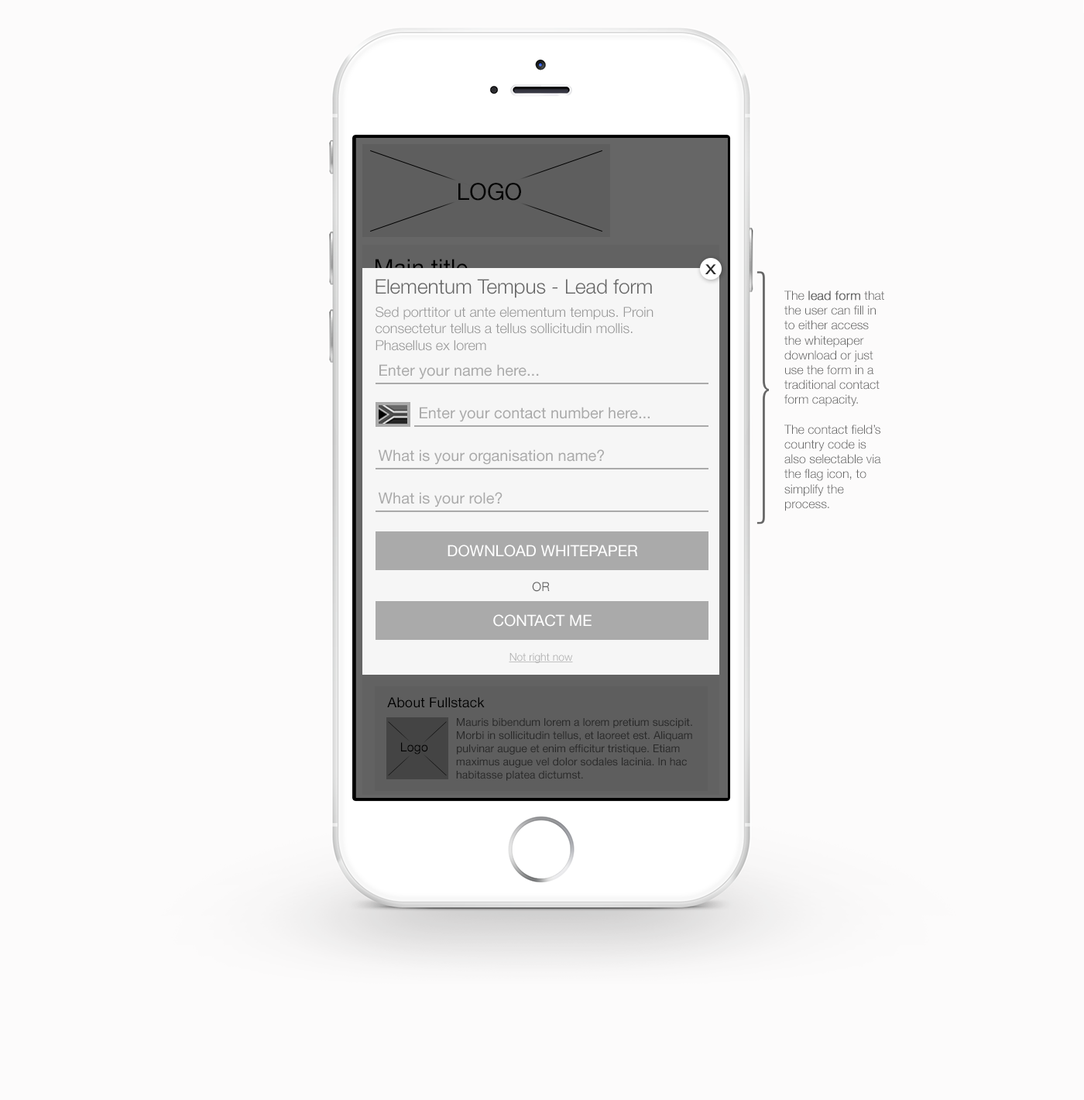
<style>
.page{position:relative;width:1084px;height:1100px;background:#fcfbfb}
.page>*{position:absolute;margin:0}
.t1{font:23.2px "HelveticaNeueLTStd-Roman";color:#000000}
.t2{font:13.9px "HelveticaNeueLTStd-Md";color:#2a2a2a;scale:1.2 1}
.t3{font:20.1px "HelveticaNeueLTStd-Lt";color:#666666}
.t4{font:12.4px "HelveticaNeueLTStd-Lt";color:#666666}
.t5{font:12.4px "HelveticaNeueLTStd-Lt";color:#666666;font-weight:bold}
.t6{font:13.9px "HelveticaNeueLTStd-Lt";color:#999999}
.t7{font:15.5px "HelveticaNeueLTStd-Roman";color:#aaaaaa}
.t8{font:15.5px "HelveticaNeueLTStd-Roman";color:#ffffff}
.t9{font:12.4px "HelveticaNeueLTStd-Roman";color:#626262}
.t10{font:10.8px "HelveticaNeueLTStd-Lt";color:#afafaf;text-decoration:underline}
.t11{font:13.9px "HelveticaNeueLTStd-Roman";color:#000000}
.t12{font:10.8px "HelveticaNeueLTStd-Roman";color:#292929}
.t13{font:12.4px "HelveticaNeueLTStd-Roman";color:#000000}
</style>
<div class="page">
<p class="t1" style="left:458px;top:183px;width:63px;height:18px">LOGO</p>
<p class="t2" style="left:705px;top:264px;width:11px;height:10px">X</p>
<p class="t3" style="left:376px;top:279px;width:276px;height:19px">Elementum Tempus - Lead form</p>
<p class="t4" style="left:785px;top:290px;width:99px;height:221px">The <span class="t5">lead form</span> that the user can fill in to either access the whitepaper download or just use the form in a traditional contact form capacity.<br><br>The contact field’s country code is also selectable via the flag icon, to simplify the process.</p>
<p class="t6" style="left:376px;top:307px;width:278px;height:44px">Sed porttitor ut ante elementum tempus. Proin<br>consectetur tellus a tellus sollicitudin mollis.<br>Phasellus ex lorem</p>
<p class="t7" style="left:379px;top:364px;width:160px;height:15px">Enter your name here...</p>
<p class="t7" style="left:420px;top:407px;width:230px;height:15px">Enter your contact number here...</p>
<p class="t7" style="left:378px;top:449px;width:226px;height:16px">What is your organisation name?</p>
<p class="t7" style="left:378px;top:492px;width:125px;height:15px">What is your role?</p>
<p class="t8" style="left:448px;top:544px;width:190px;height:13px">DOWNLOAD WHITEPAPER</p>
<p class="t9" style="left:532px;top:582px;width:18px;height:10px">OR</p>
<p class="t8" style="left:493px;top:614px;width:99px;height:13px">CONTACT ME</p>
<p class="t10" style="left:509px;top:653px;width:64px;height:10px">Not right now</p>
<p class="t11" style="left:387px;top:697px;width:98px;height:11px">About Fullstack</p>
<p class="t12" style="left:456px;top:718px;width:236px;height:63px">Mauris bibendum lorem a lorem pretium suscipit. Morbi in sollicitudin tellus, et laoreet est. Aliquam pulvinar augue et enim efficitur tristique. Etiam maximus augue vel dolor sodales lacinia. In hac habitasse platea dictumst.</p>
<p class="t13" style="left:401px;top:742px;width:27px;height:12px">Logo</p>
</div>
